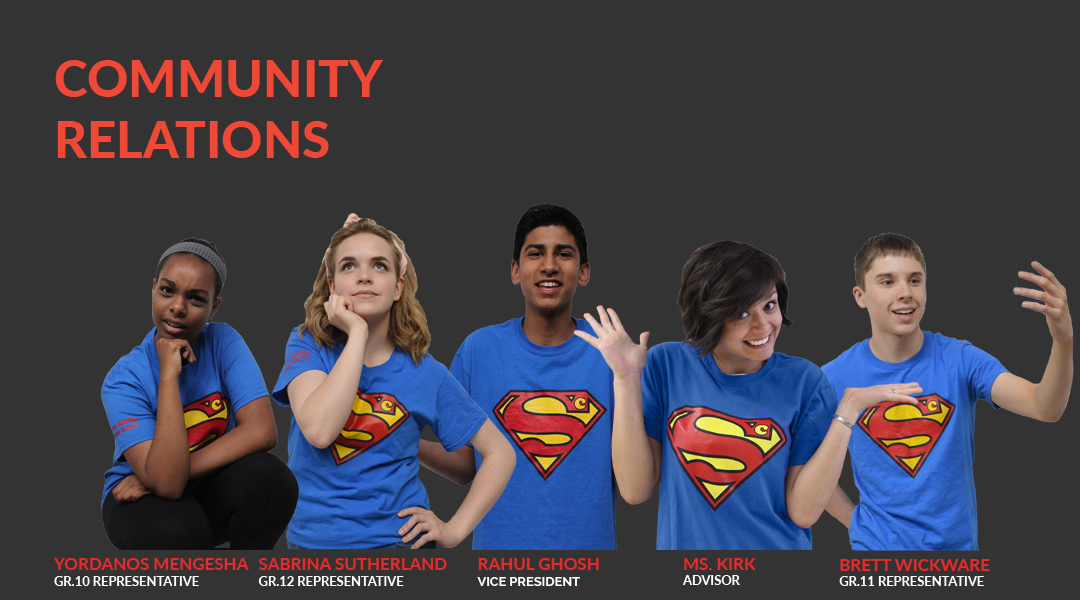
<style>
.page{position:relative;width:1080px;height:600px;background:#333333}
.page>*{position:absolute;margin:0}
.t1{font:51px "Lato-Heavy";color:#ef4836}
.t2{font:12.9px "Lato-Bold";color:#ffffff}
.t3{font:17px "Lato-Bold";color:#e42a2a}
.t4{font:12.9px "Raleway-Bold";color:#ffffff}
</style>
<div class="page">
<p class="t1" style="left:55px;top:60px;width:328px;height:98px">COMMUNITY RELATIONS</p>
<p class="t2" style="left:53px;top:558px;width:196px;height:28px"><span class="t3">YORDANOS MENGESHA<br></span>GR.10 REPRESENTATIVE</p>
<p class="t2" style="left:258px;top:558px;width:189px;height:28px"><span class="t3">SABRINA SUTHERLAND<br></span>GR.12 REPRESENTATIVE</p>
<p class="t4" style="left:477px;top:558px;width:122px;height:28px"><span class="t3">RAHUL GHOSH<br></span>VICE PRESIDENT</p>
<p class="t3" style="left:682px;top:558px;width:74px;height:27px">MS. KIRK<br><span class="t2">ADVISOR</span></p>
<p class="t2" style="left:839px;top:559px;width:151px;height:27px"><span class="t3">BRETT WICKWARE<br></span>GR.11 REPRESENTATIVE</p>
</div>
